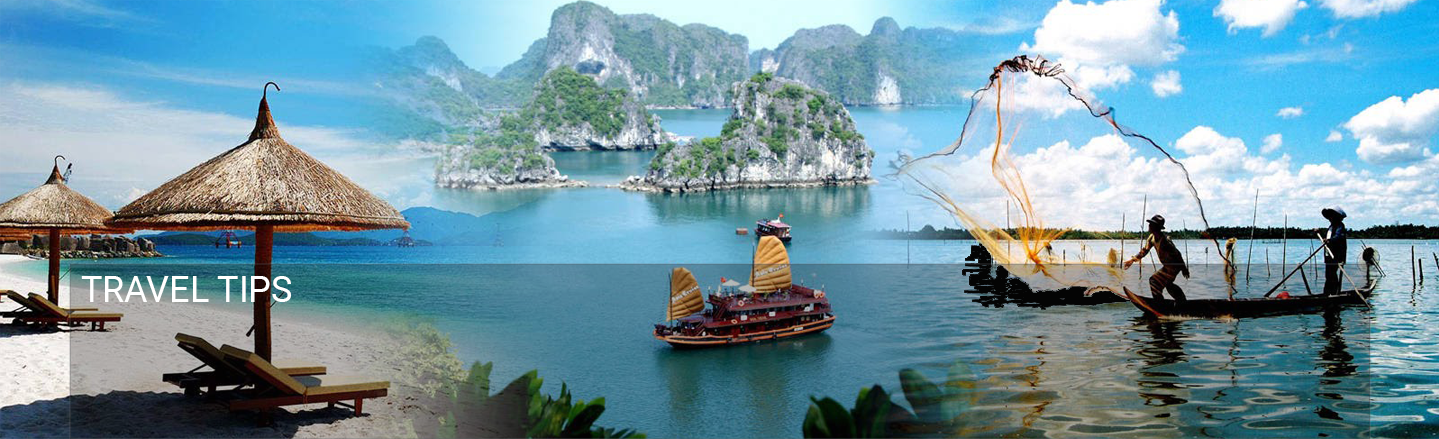
<style>
.page{position:relative;width:1439px;height:439px}
.page>*{position:absolute;margin:0}
.t1{font:36px "Roboto-Regular";color:#ffffff}
</style>
<div class="page">
<p class="t1" style="left:81px;top:276px;width:210px;height:26px">TRAVEL TIPS</p>
</div>
